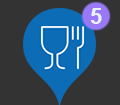
<style>
.page{position:relative;width:120px;height:105px;background:#333333}
.page>*{position:absolute;margin:0}
.t1{font:22px "Arial-BoldMT";color:#eaf3f9}
</style>
<div class="page">
<p class="t1" style="left:90px;top:8px;width:12px;height:16px">5</p>
</div>
